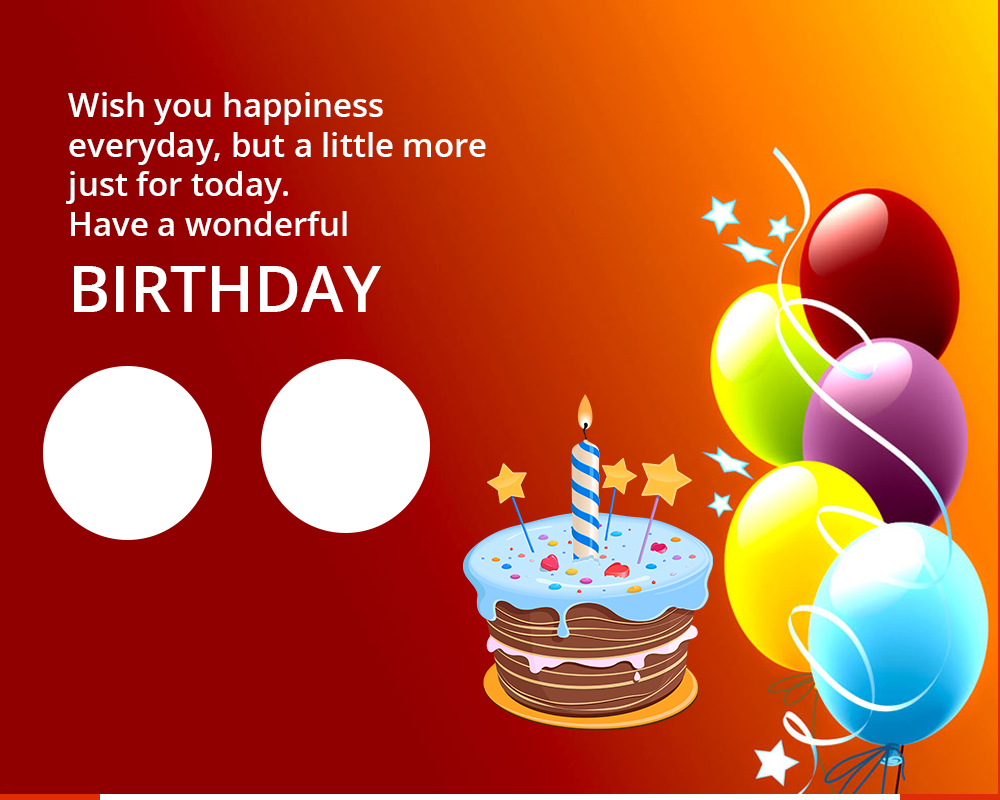
<style>
.page{position:relative;width:1000px;height:800px;background:#910000}
.page>*{position:absolute;margin:0}
.t1{font:33px "OpenSans-Semibold";color:#ffffff}
.t2{font:63.6px "OpenSans-Semibold";color:#ffffff}
</style>
<div class="page">
<p class="t1" style="left:66px;top:92px;width:420px;height:220px">Wish you happiness<br>everyday, but a little more just for today.<br>Have a wonderful <br><span class="t2">BIRTHDAY</span></p>
</div>
